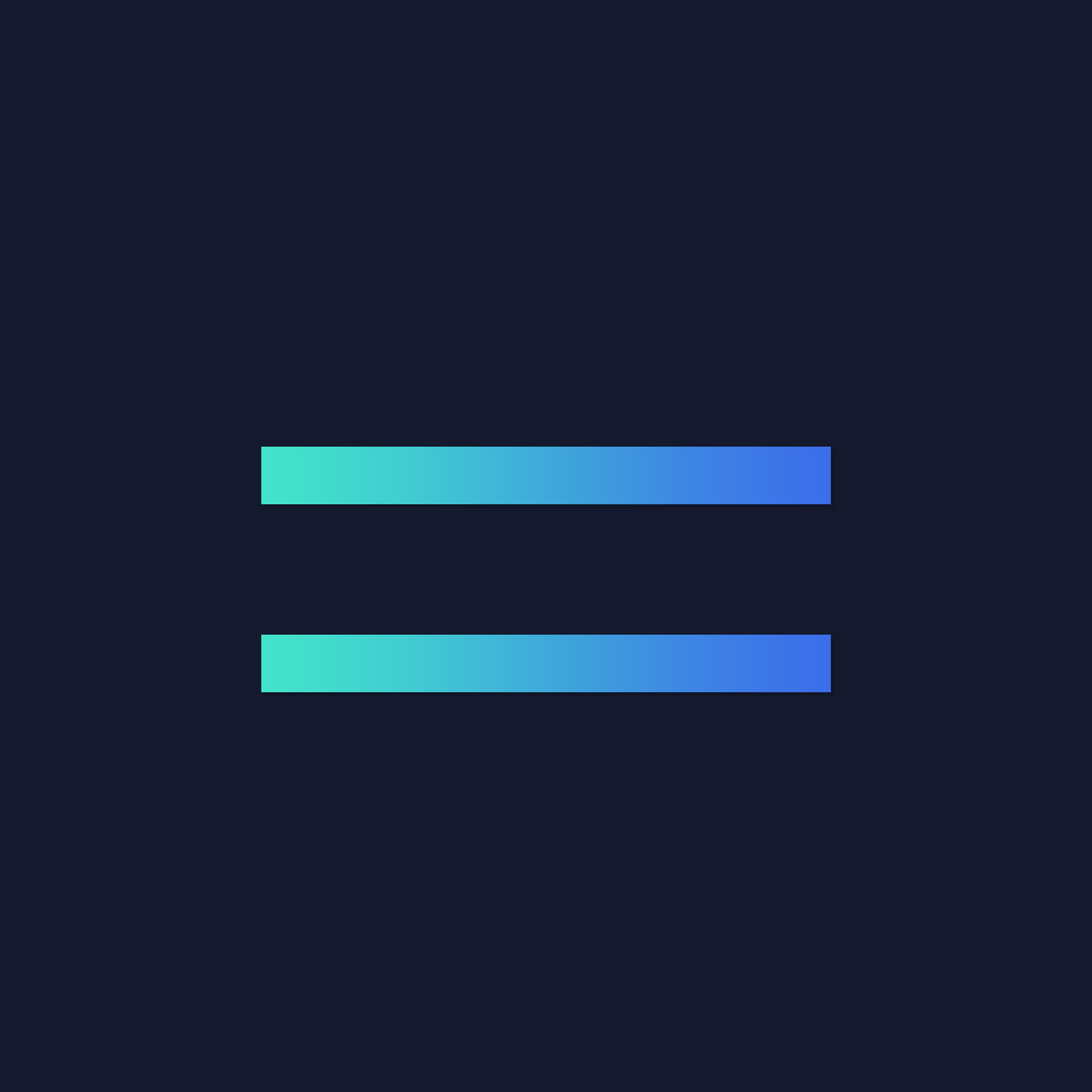
<style>
.page{position:relative;width:1092px;height:1092px;background:#14192d}
.page>*{position:absolute;margin:0}
.t1{font:959px "MyriadPro-Regular";scale:1.15 1}
</style>
<div class="page">
<p class="t1" style="left:261px;top:446px;width:570px;height:246px">=</p>
</div>
